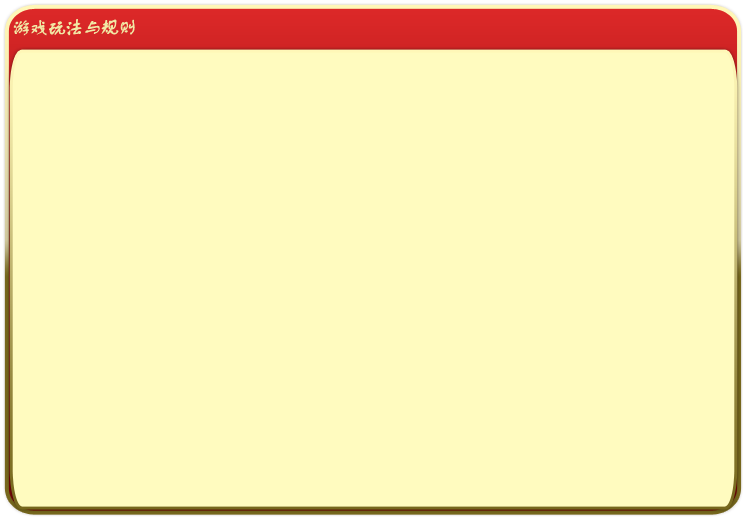
<style>
.page{position:relative;width:746px;height:520px;background:#fffbbf}
.page>*{position:absolute;margin:0}
.t1{font:20px "FZSTK--GBK1-0";letter-spacing:-0.14em;color:#f1e8a5;font-weight:bold}
</style>
<div class="page">
<p class="t1" style="left:13px;top:19px;width:122px;height:17px">游戏玩法与规则</p>
</div>
